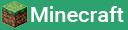
<style>
.page{position:relative;width:128px;height:30px;background:#2ca36e}
.page>*{position:absolute;margin:0}
.t1{font:21.3px "Roboto-Medium";color:#ffffff}
</style>
<div class="page">
<p class="t1" style="left:31px;top:6px;width:93px;height:16px">Minecraft</p>
</div>
